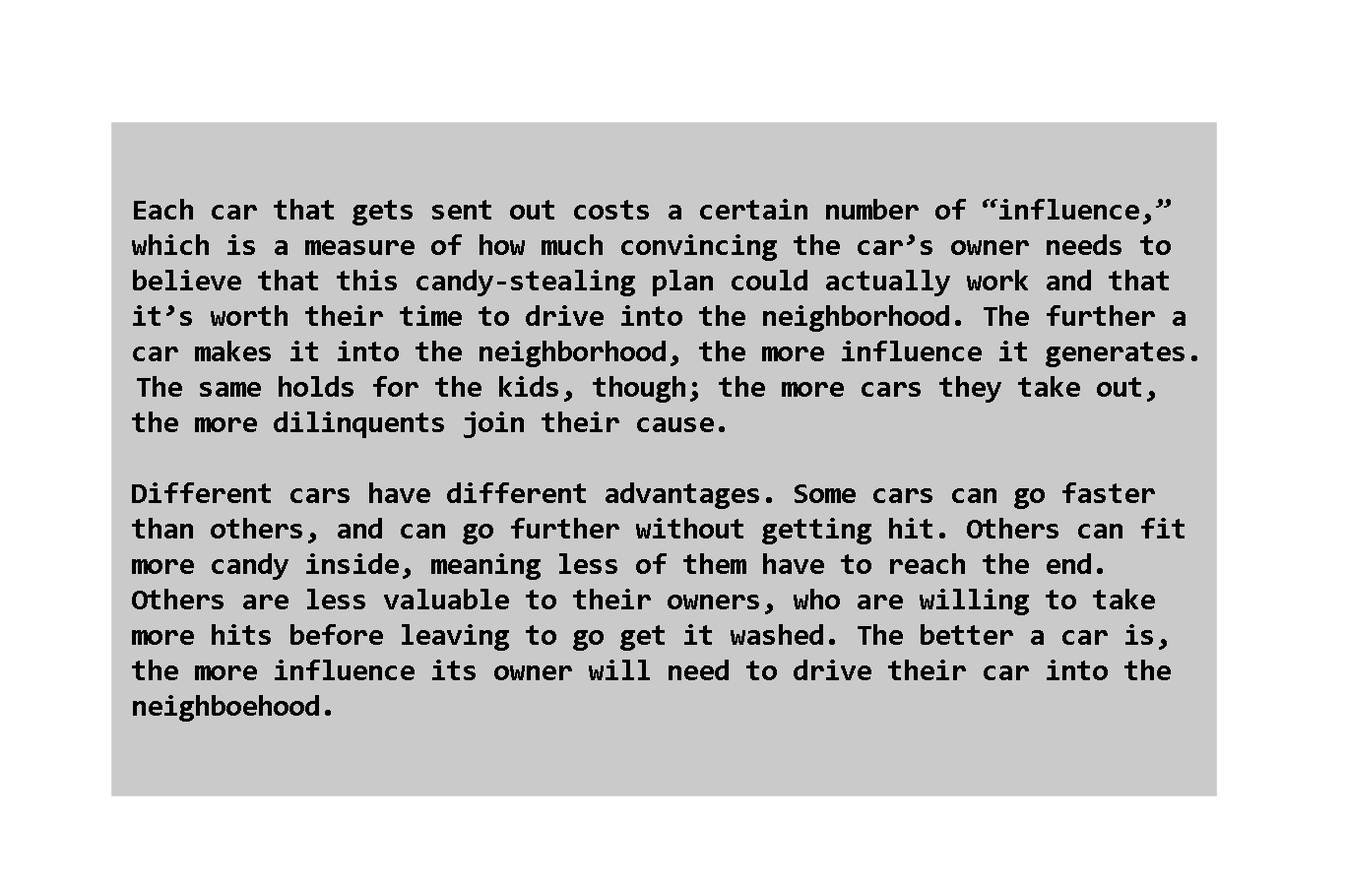
<style>
.page{position:relative;width:1345px;height:886px;background:#cacaca}
.page>*{position:absolute;margin:0}
.t1{font:29.5px "Consolas-Bold";color:#000000}
</style>
<div class="page">
<p class="t1" style="left:132px;top:199px;width:1066px;height:523px">Each car that gets sent out costs a certain number of “influence,”<br>  which is a measure of how much convincing the car’s owner needs to<br>  believe that this candy-stealing plan could actually work and that<br>  it’s worth their time to drive into the neighborhood. The further a<br>  car makes it into the neighborhood, the more influence it generates.<br> The same holds for the kids, though; the more cars they take out,<br>  the more dilinquents join their cause.<br><br>  Different cars have different advantages. Some cars can go faster<br>  than others, and can go further without getting hit. Others can fit<br>  more candy inside, meaning less of them have to reach the end.<br>  Others are less valuable to their owners, who are willing to take<br>  more hits before leaving to go get it washed. The better a car is,<br>  the more influence its owner will need to drive their car into the<br>  neighboehood.</p>
</div>
